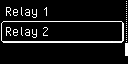
<style>
.page{position:relative;width:128px;height:64px;background:#000000}
.page>*{position:absolute;margin:0}
.t1{font:16px "PixelOperator";color:#ffffff}
</style>
<div class="page">
<p class="t1" style="left:5px;top:7px;width:42px;height:11px">Relay 1</p>
<p class="t1" style="left:5px;top:27px;width:43px;height:11px">Relay 2</p>
</div>
